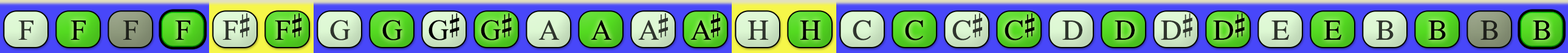
<style>
.page{position:relative;width:1568px;height:53px}
.page>*{position:absolute;margin:0}
.t1{font:29.2px "OpusChords";color:#30352d}
.t2{font:29.2px "OpusChords";color:#000000}
.t3{font:29.2px "OpusChords";letter-spacing:-0.025em;color:#000000}
.t4{font:29.2px "OpusChords";letter-spacing:-0.1em;color:#2f352d}
.t5{font:29.2px "OpusChords";letter-spacing:-0.1em;color:#000000}
.t6{font:29.2px "OpusChords";color:#2f352d}
.t7{font:29.2px "OpusChords";letter-spacing:-0.025em;color:#2f352d}
.t8{font:29.2px "OpusChords";color:#30362e}
.t9{font:29.2px "OpusChords";color:#1f211b}
</style>
<div class="page">
<p class="t1" style="left:222px;top:13px;width:28px;height:27px">F#</p>
<p class="t2" style="left:275px;top:13px;width:27px;height:27px">F#</p>
<p class="t3" style="left:428px;top:13px;width:31px;height:28px">G#</p>
<p class="t3" style="left:481px;top:13px;width:31px;height:28px">G#</p>
<p class="t4" style="left:638px;top:13px;width:30px;height:27px">A#</p>
<p class="t5" style="left:690px;top:13px;width:30px;height:27px">A#</p>
<p class="t6" style="left:952px;top:13px;width:30px;height:28px">C#</p>
<p class="t2" style="left:1005px;top:13px;width:29px;height:28px">C#</p>
<p class="t7" style="left:1161px;top:13px;width:31px;height:27px">D#</p>
<p class="t3" style="left:1213px;top:13px;width:32px;height:27px">D#</p>
<p class="t8" style="left:18px;top:21px;width:15px;height:19px">F</p>
<p class="t2" style="left:70px;top:21px;width:16px;height:19px">F</p>
<p class="t9" style="left:123px;top:21px;width:15px;height:19px">F</p>
<p class="t2" style="left:175px;top:21px;width:15px;height:19px">F</p>
<p class="t6" style="left:330px;top:20px;width:20px;height:21px">G</p>
<p class="t2" style="left:382px;top:20px;width:20px;height:21px">G</p>
<p class="t6" style="left:538px;top:20px;width:21px;height:20px">A</p>
<p class="t2" style="left:591px;top:20px;width:20px;height:20px">A</p>
<p class="t1" style="left:748px;top:21px;width:20px;height:19px">H</p>
<p class="t2" style="left:800px;top:21px;width:20px;height:19px">H</p>
<p class="t8" style="left:853px;top:20px;width:18px;height:21px">C</p>
<p class="t2" style="left:905px;top:20px;width:18px;height:21px">C</p>
<p class="t6" style="left:1062px;top:21px;width:20px;height:19px">D</p>
<p class="t2" style="left:1115px;top:21px;width:20px;height:19px">D</p>
<p class="t8" style="left:1271px;top:21px;width:18px;height:19px">E</p>
<p class="t2" style="left:1324px;top:21px;width:17px;height:19px">E</p>
<p class="t1" style="left:1376px;top:21px;width:18px;height:19px">B</p>
<p class="t2" style="left:1428px;top:21px;width:18px;height:19px">B</p>
<p class="t9" style="left:1480px;top:21px;width:18px;height:19px">B</p>
<p class="t2" style="left:1533px;top:21px;width:17px;height:19px">B</p>
</div>
